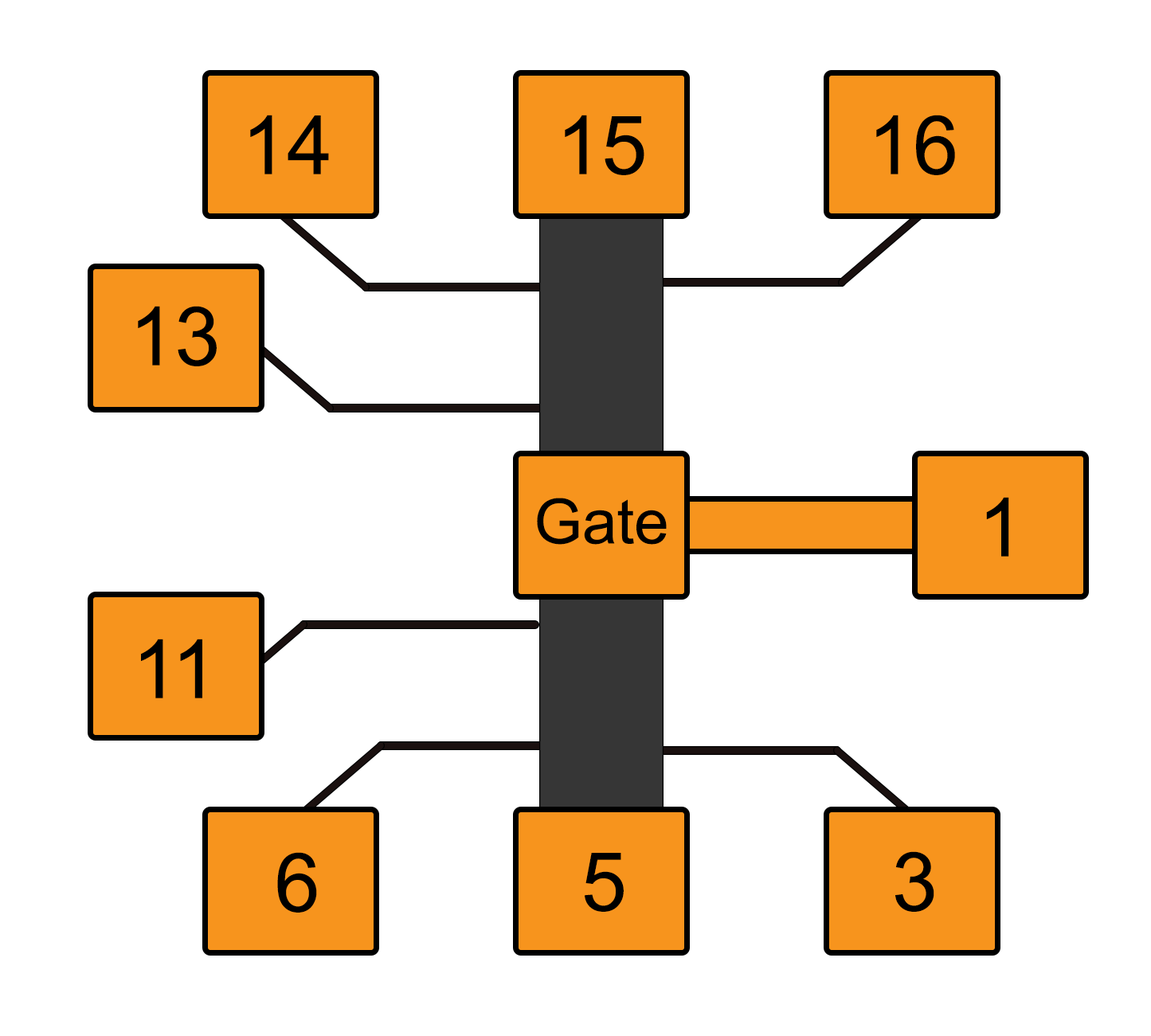
<style>
.page{position:relative;width:1151px;height:1036px;background:#ffffff}
.page>*{position:absolute;margin:0}
.t1{font:81.8px "ArialMT";color:#000000}
.t2{font:62.2px "ArialMT";color:#000000}
</style>
<div class="page">
<p class="t1" style="left:250px;top:115px;width:79px;height:59px">14</p>
<p class="t1" style="left:565px;top:115px;width:79px;height:60px">15</p>
<p class="t1" style="left:876px;top:115px;width:79px;height:60px">16</p>
<p class="t1" style="left:138px;top:306px;width:79px;height:60px">13</p>
<p class="t2" style="left:537px;top:498px;width:130px;height:47px">Gate</p>
<p class="t1" style="left:986px;top:497px;width:23px;height:60px">1</p>
<p class="t1" style="left:141px;top:639px;width:61px;height:59px">11</p>
<p class="t1" style="left:277px;top:852px;width:40px;height:61px">6</p>
<p class="t1" style="left:585px;top:853px;width:39px;height:59px">5</p>
<p class="t1" style="left:895px;top:851px;width:39px;height:61px">3</p>
</div>
